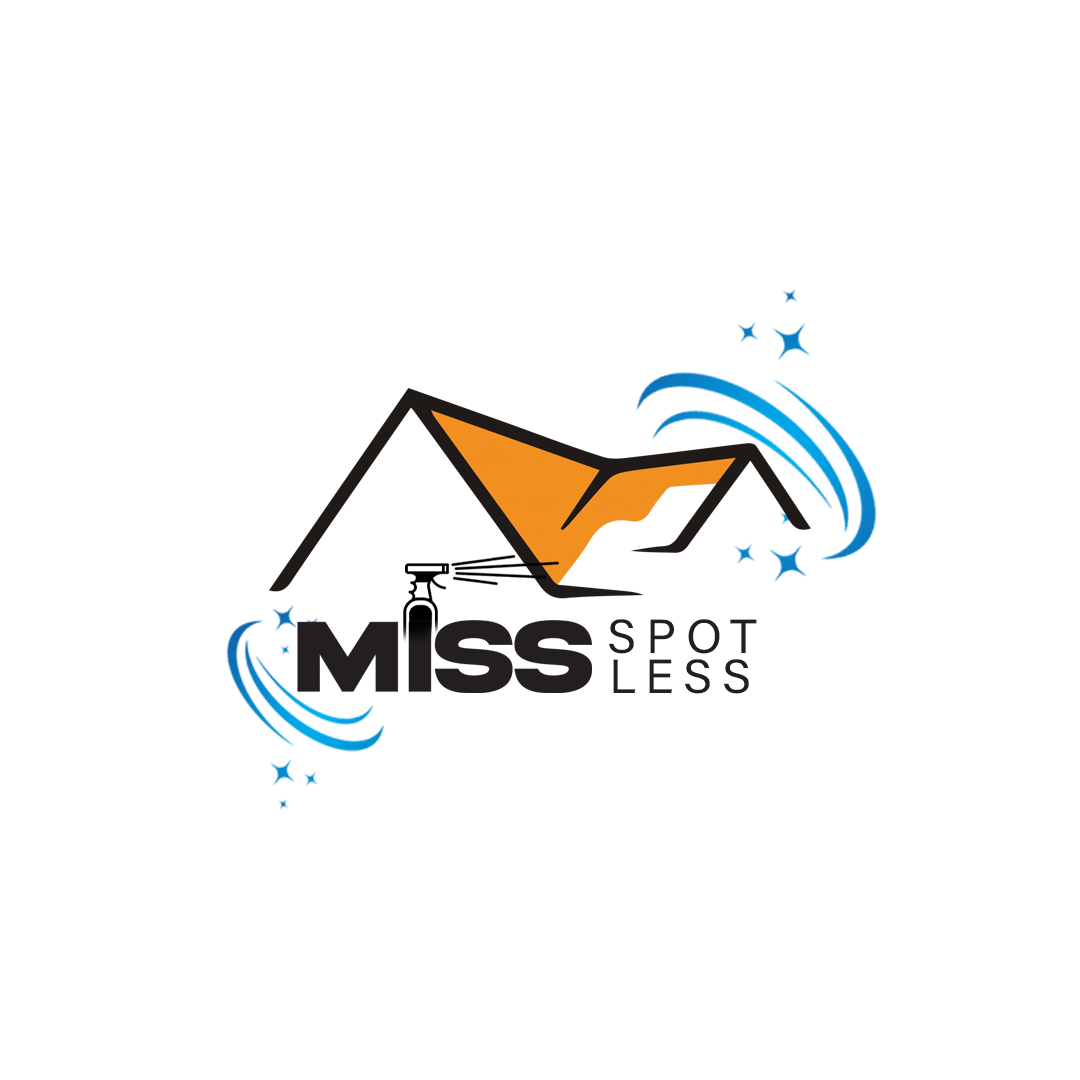
<style>
.page{position:relative;width:1080px;height:1080px;background:#ffffff}
.page>*{position:absolute;margin:0}
.t1{font:48px "AcuminConcept_404.000wght";letter-spacing:0.2em;color:#231f20}
</style>
<div class="page">
<p class="t1" style="left:609px;top:619px;width:148px;height:35px">SPOT</p>
<p class="t1" style="left:613px;top:659px;width:136px;height:35px">LESS</p>
</div>
